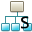
<style>
.page{position:relative;width:32px;height:32px;background:#ffffff}
.page>*{position:absolute;margin:0}
.t1{font:18px "Consolas";color:#000000}
</style>
<div class="page">
<p class="t1" style="left:21px;top:16px;width:8px;height:13px">S</p>
</div>
